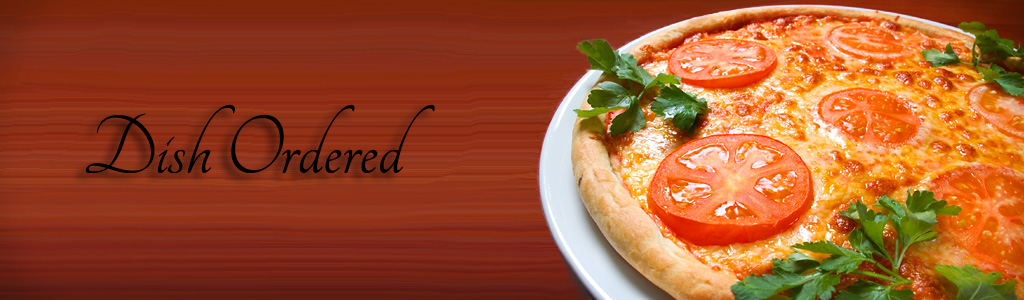
<style>
.page{position:relative;width:1024px;height:300px}
.page>*{position:absolute;margin:0}
.t1{font:90px "Tangerine";color:#000000}
</style>
<div class="page">
<p class="t1" style="left:85px;top:104px;width:350px;height:69px">Dish Ordered</p>
</div>
